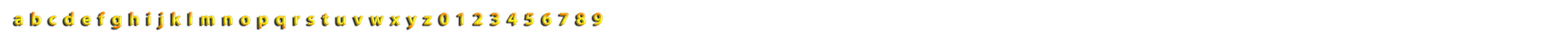
<style>
.page{position:relative;width:1568px;height:44px;background:#ffffff}
.page>*{position:absolute;margin:0}
.t1{font:17.8px "MyriadHebrew-Bold"}
</style>
<div class="page">
<p class="t1" style="left:15px;top:12px;width:588px;height:17px">a  b  c  d  e  f  g  h  i  j  k  l  m  n  o  p  q  r  s  t  u  v  w  x  y  z  0  1  2  3  4  5  6  7  8  9</p>
</div>
